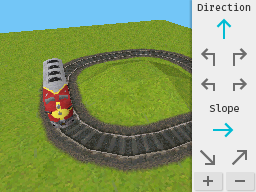
<style>
.page{position:relative;width:256px;height:192px}
.page>*{position:absolute;margin:0}
.t1{font:10px "FiraMono-Regular";color:#3b3b3b}
</style>
<div class="page">
<p class="t1" style="left:197px;top:3px;width:54px;height:8px">Direction</p>
<p class="t1" style="left:209px;top:104px;width:30px;height:10px">Slope</p>
</div>
